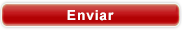
<style>
.page{position:relative;width:182px;height:30px}
.page>*{position:absolute;margin:0}
.t1{font:14px "Arial-BoldMT";letter-spacing:0.05em;color:#ffffff}
</style>
<div class="page">
<p class="t1" style="left:67px;top:10px;width:47px;height:11px">Enviar</p>
</div>
